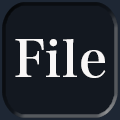
<style>
.page{position:relative;width:120px;height:120px;background:#131820}
.page>*{position:absolute;margin:0}
.t1{font:50px "HiraMinProN-W6";color:#f8f6f6}
</style>
<div class="page">
<p class="t1" style="left:15px;top:39px;width:91px;height:39px">File</p>
</div>
